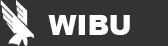
<style>
.page{position:relative;width:168px;height:46px;background:#333333}
.page>*{position:absolute;margin:0}
.t1{font:28px "Arial-Black";color:#ffffff}
</style>
<div class="page">
<p class="t1" style="left:48px;top:15px;width:82px;height:20px">WIBU</p>
</div>
